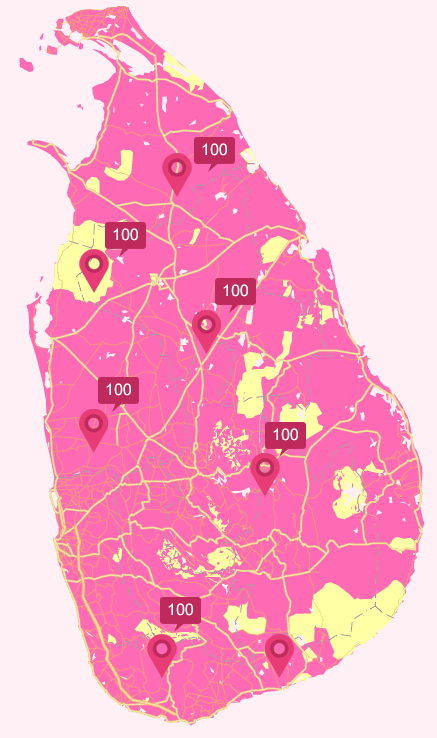
<style>
.page{position:relative;width:437px;height:738px;background:#fff0f5}
.page>*{position:absolute;margin:0}
.t1{font:12px "ArialMT";color:#ffffff}
</style>
<div class="page">
<p class="t1" style="left:202px;top:143px;width:25px;height:13px">100</p>
<p class="t1" style="left:113px;top:228px;width:25px;height:13px">100</p>
<p class="t1" style="left:223px;top:284px;width:25px;height:13px">100</p>
<p class="t1" style="left:106px;top:383px;width:25px;height:13px">100</p>
<p class="t1" style="left:273px;top:428px;width:25px;height:13px">100</p>
<p class="t1" style="left:168px;top:603px;width:25px;height:13px">100</p>
</div>
